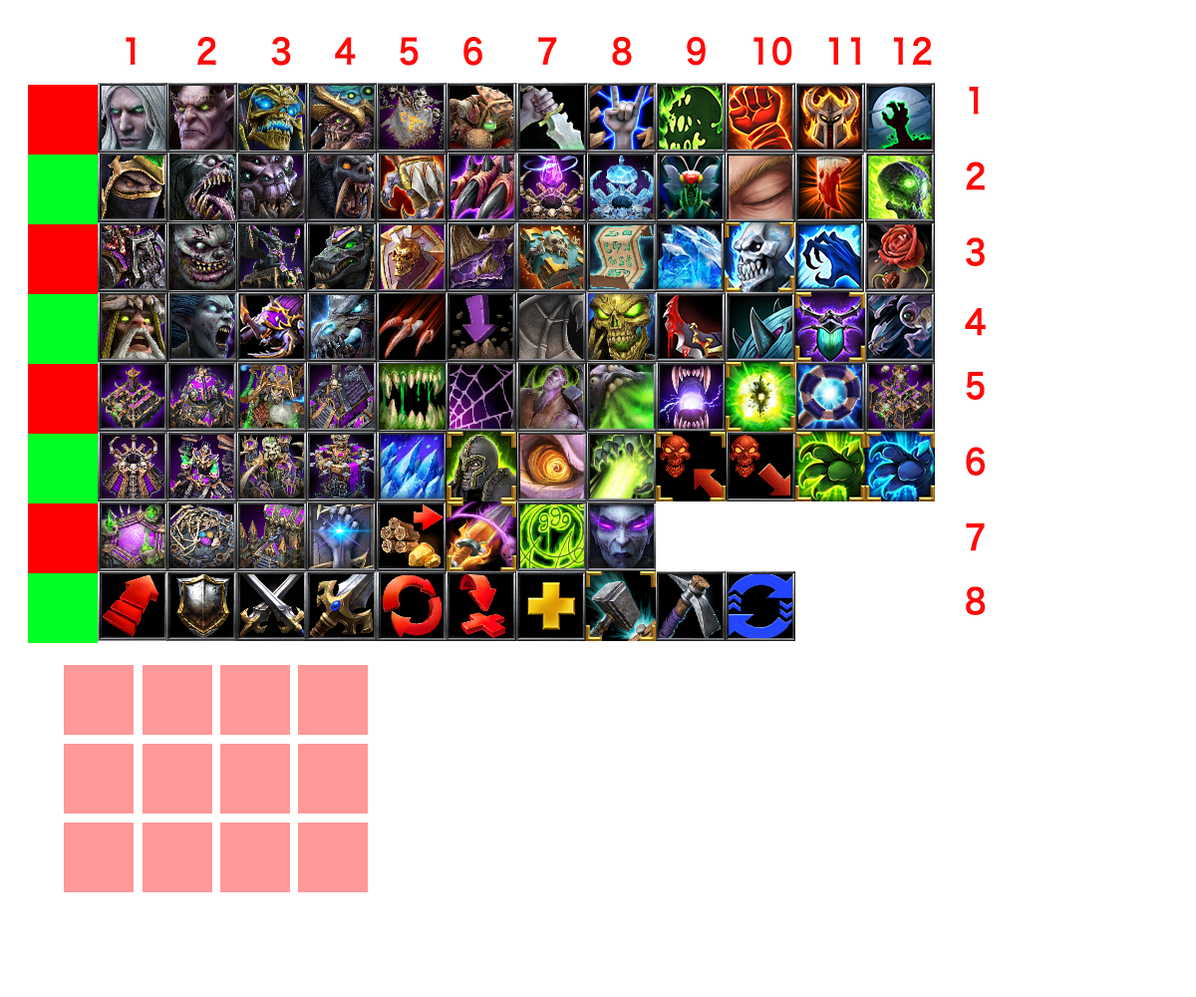
<style>
.page{position:relative;width:1196px;height:997px;background:#ffffff}
.page>*{position:absolute;margin:0}
.t1{font:33.9px "HiraginoSansGB-W6";letter-spacing:0.02em;color:#ff0909;scale:0.88 1}
.t2{font:33.9px/37.9px "HiraginoSansGB-W6";letter-spacing:0.02em;color:#ff0909;scale:0.88 1}
.t3{font:33.9px/31.9px "HiraginoSansGB-W6";letter-spacing:0.02em;color:#ff0909;scale:0.88 1}
</style>
<div class="page">
<p class="t1" style="left:126px;top:37px;width:806px;height:29px">1     2     3    4    5    6     7     8     9    10   11  12</p>
<p class="t2" style="left:965px;top:86px;width:21px;height:529px">1<br><br>2<br><br>3<br><br><span class="t3">4<br><br>5<br></span><br>6<br><br>7<span class="t3"><br><br>8</span></p>
</div>
